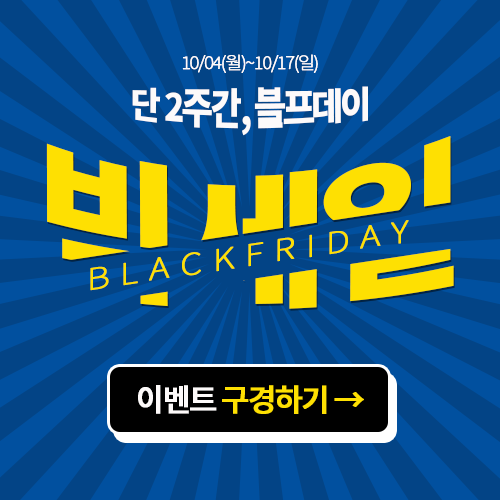
<style>
.page{position:relative;width:500px;height:500px;background:#034486}
.page>*{position:absolute;margin:0}
.t1{font:17.6px "NotoSansKR-Thin";letter-spacing:-0.08em;color:#fdfafa;font-weight:bold}
.t2{font:34.2px "NotoSansKR-Black";letter-spacing:-0.08em;color:#fdfafa}
.t3{font:167.8px "NotoSansKR-Black";letter-spacing:-0.08em;color:#fee002}
.t4{font:29.3px "NotoSansKR-Thin";letter-spacing:0.3em;color:#fee002;font-weight:bold;scale:1.19 1}
.t5{font:31.1px "NotoSansKR-Medium";letter-spacing:-0.08em;color:#fee002;font-weight:bold}
.t6{font:31.1px "NotoSansKR-Medium";letter-spacing:-0.08em;color:#fdfafa;font-weight:bold}
</style>
<div class="page">
<p class="t1" style="left:182px;top:54px;width:136px;height:19px">10/04(월)~10/17(일)</p>
<p class="t2" style="left:132px;top:86px;width:236px;height:50px">단 2주간, 블프데이</p>
<p class="t3" style="left:46px;top:136px;width:408px;height:173px">빅세일</p>
<p class="t4" style="left:90px;top:220px;width:319px;height:71px;rotate:-9deg">BLACKFRIDAY</p>
<p class="t5" style="left:138px;top:385px;width:226px;height:29px"><span class="t6">이벤트 </span>구경하기 →</p>
</div>
